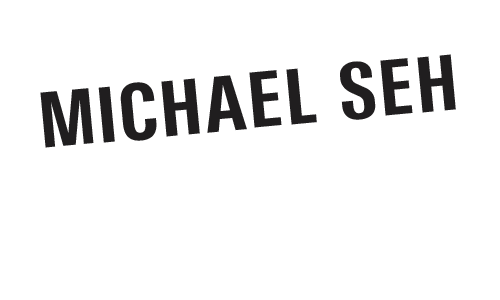
<style>
.page{position:relative;width:500px;height:300px;background:#ffffff}
.page>*{position:absolute;margin:0}
.t1{font:80px "UtahCondensed-Bold";color:#201e1f}
</style>
<div class="page">
<p class="t1" style="left:40px;top:54px;width:416px;height:94px;rotate:-5deg">MICHAEL SEH</p>
</div>
